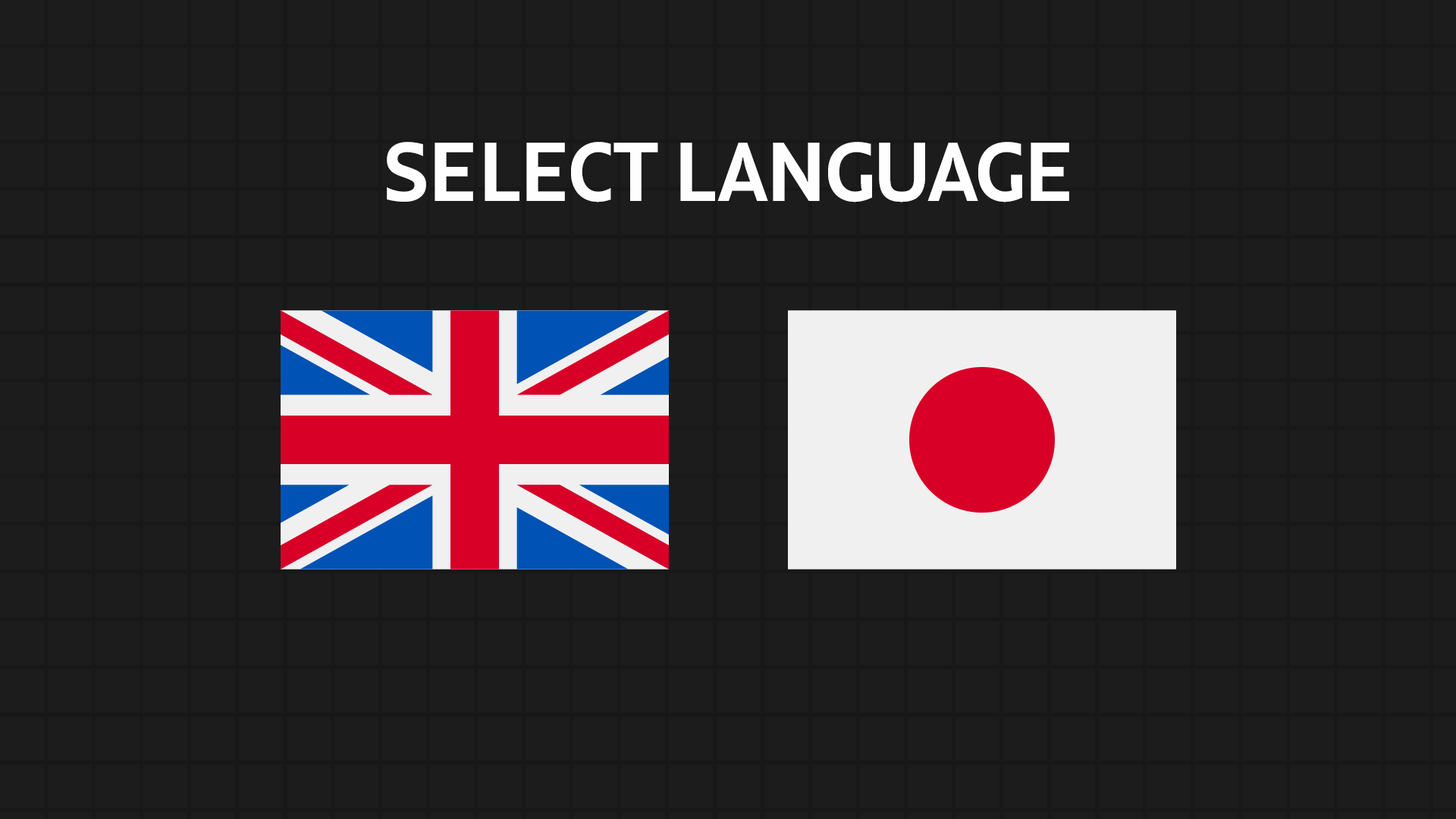
<style>
.page{position:relative;width:1456px;height:819px;background:#1d1c1d}
.page>*{position:absolute;margin:0}
.t1{font:72.7px "JuneExptVariable-Active";color:#fefefe}
</style>
<div class="page">
<p class="t1" style="left:387px;top:142px;width:682px;height:60px">SELECT LANGUAGE</p>
</div>
